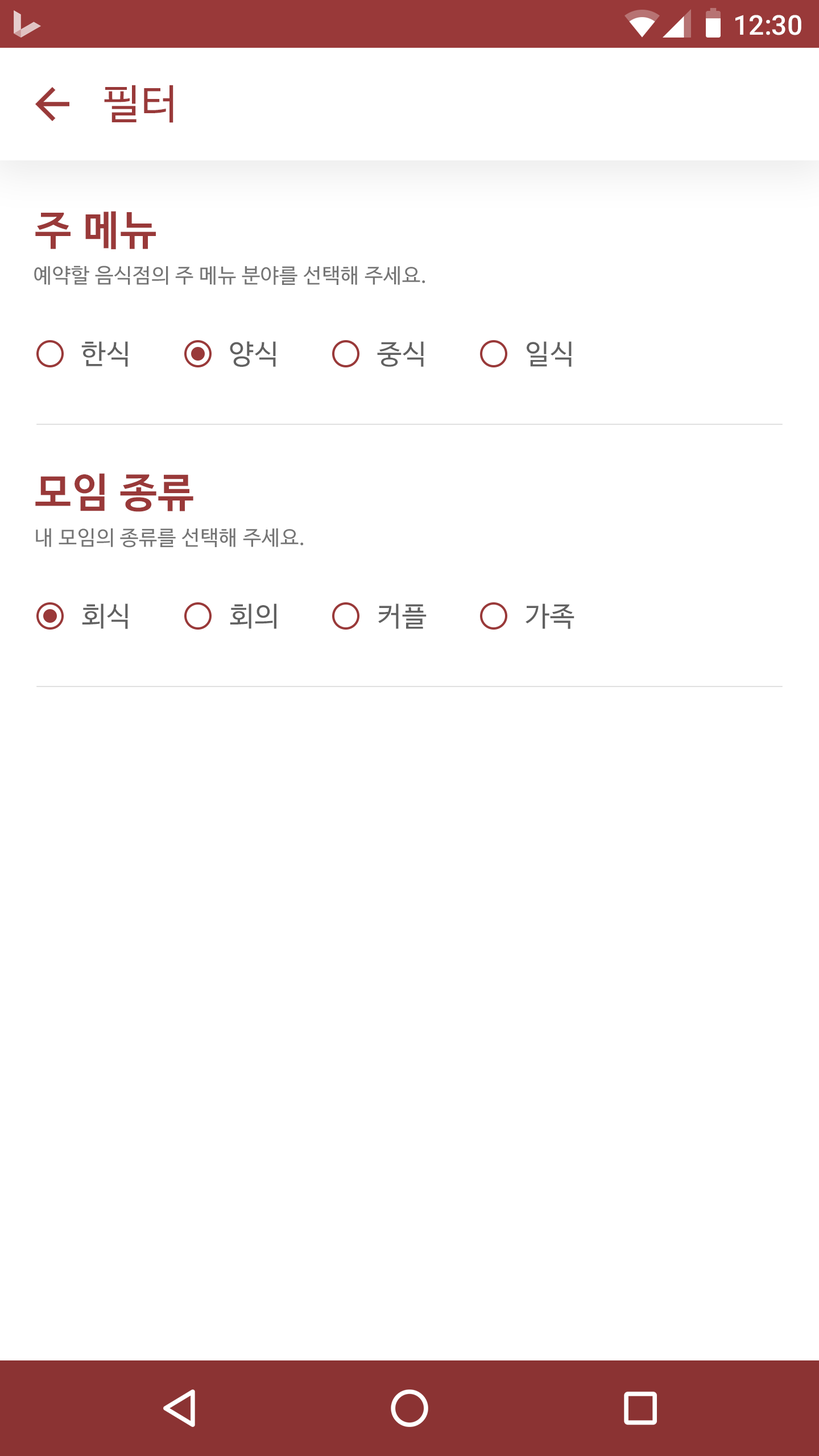
<style>
.page{position:relative;width:819px;height:1456px;background:#ffffff}
.page>*{position:absolute;margin:0}
.t1{font:27.3px "Roboto-Medium";color:#ffffff}
.t2{font:40.9px "NanumBarunGothic";letter-spacing:0.025em;color:#993939}
.t3{font:40.9px "NanumBarunGothicBold";letter-spacing:0.025em;color:#993939}
.t4{font:20.5px "NanumBarunGothic";letter-spacing:0.025em;color:#757575}
.t5{font:27.3px "NanumBarunGothic";letter-spacing:0.025em;color:#616161}
</style>
<div class="page">
<p class="t1" style="left:735px;top:15px;width:66px;height:20px">12:30</p>
<p class="t2" style="left:104px;top:85px;width:69px;height:38px">필터</p>
<p class="t3" style="left:35px;top:211px;width:121px;height:39px">주 메뉴</p>
<p class="t4" style="left:34px;top:266px;width:391px;height:19px">예약할 음식점의 주 메뉴 분야를 선택해 주세요.</p>
<p class="t5" style="left:81px;top:341px;width:47px;height:26px">한식</p>
<p class="t5" style="left:230px;top:341px;width:46px;height:26px">양식</p>
<p class="t5" style="left:377px;top:341px;width:47px;height:26px">중식</p>
<p class="t5" style="left:527px;top:341px;width:45px;height:26px">일식</p>
<p class="t3" style="left:35px;top:473px;width:158px;height:39px">모임 종류</p>
<p class="t4" style="left:36px;top:528px;width:268px;height:20px">내 모임의 종류를 선택해 주세요.</p>
<p class="t5" style="left:82px;top:603px;width:46px;height:26px">회식</p>
<p class="t5" style="left:230px;top:603px;width:46px;height:26px">회의</p>
<p class="t5" style="left:378px;top:603px;width:49px;height:26px">커플</p>
<p class="t5" style="left:526px;top:603px;width:48px;height:26px">가족</p>
</div>
